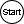
<style>
.page{position:relative;width:24px;height:24px;background:#ffffff}
.page>*{position:absolute;margin:0}
.t1{font:8px "ArialMT";color:#000000}
</style>
<div class="page">
<p class="t1" style="left:3px;top:9px;width:18px;height:6px">Start</p>
</div>
